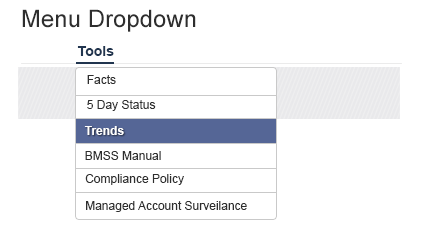
<style>
.page{position:relative;width:426px;height:230px;background:#ffffff}
.page>*{position:absolute;margin:0}
.t1{font:24px "ArialMT";color:#2e2e2e}
.t2{font:14px "Arial-BoldMT";color:#21354f}
.t3{font:12px "ArialMT";color:#2e2e2e}
.t4{font:12px "Arial-BoldMT";color:#ffffff}
</style>
<div class="page">
<p class="t1" style="left:22px;top:9px;width:174px;height:23px">Menu Dropdown</p>
<p class="t2" style="left:77px;top:46px;width:37px;height:10px">Tools</p>
<p class="t3" style="left:87px;top:75px;width:29px;height:9px">Facts</p>
<p class="t3" style="left:87px;top:100px;width:69px;height:11px">5 Day Status</p>
<p class="t4" style="left:84px;top:126px;width:40px;height:9px">Trends</p>
<p class="t3" style="left:85px;top:151px;width:76px;height:9px">BMSS Manual</p>
<p class="t3" style="left:85px;top:174px;width:99px;height:11px">Compliance Policy</p>
<p class="t3" style="left:86px;top:201px;width:161px;height:11px">Managed Account Surveilance</p>
</div>
